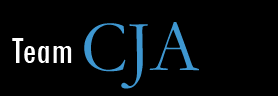
<style>
.page{position:relative;width:278px;height:96px;background:#000000}
.page>*{position:absolute;margin:0}
.t1{font:73.3px "Garamond";color:#3e97d1}
.t2{font:40px "TwCenMT-Condensed";color:#ffffff}
</style>
<div class="page">
<p class="t1" style="left:84px;top:22px;width:115px;height:67px">CJA</p>
<p class="t2" style="left:12px;top:38px;width:60px;height:25px">Team</p>
</div>
